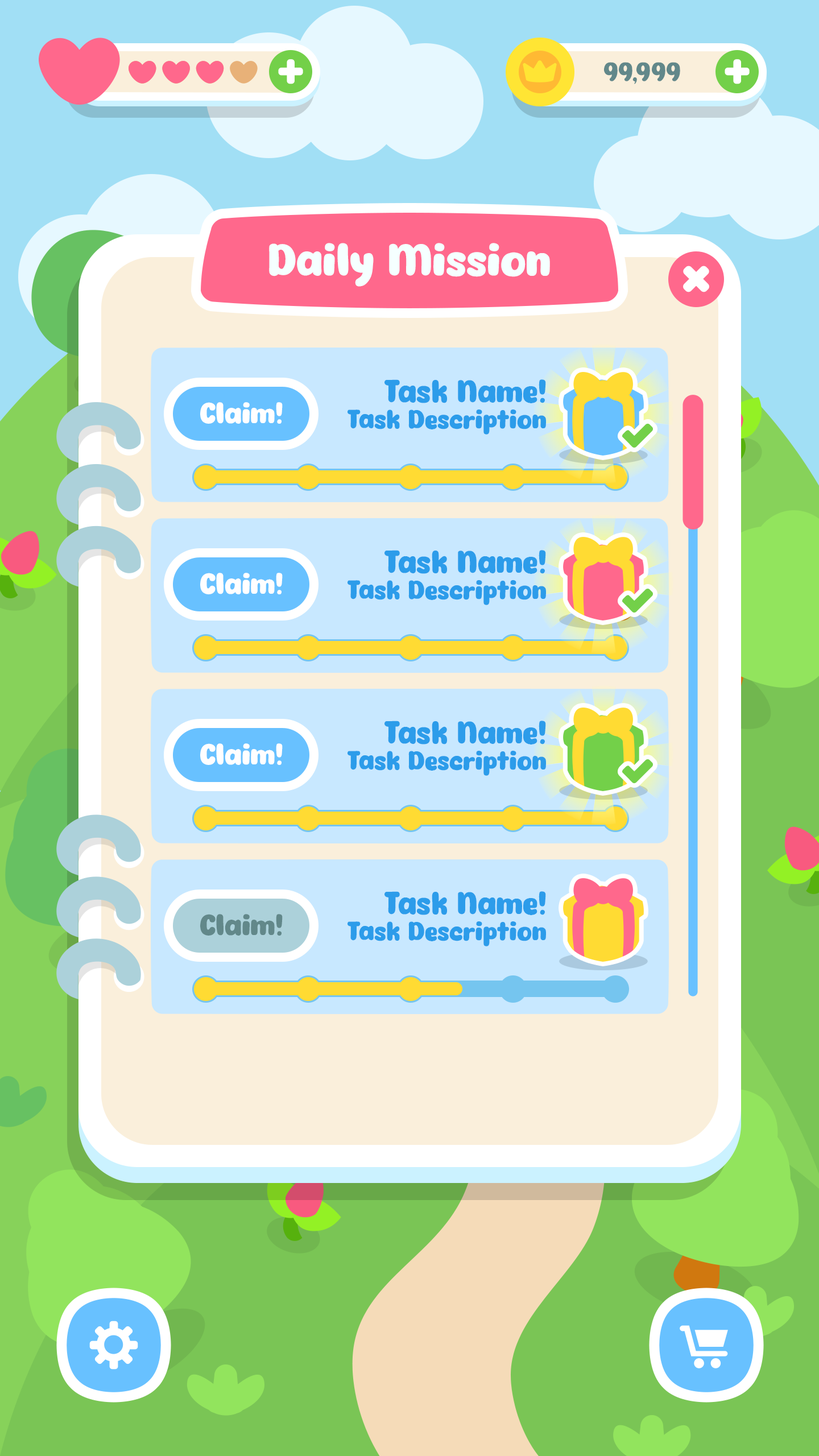
<style>
.page{position:relative;width:819px;height:1456px}
.page>*{position:absolute;margin:0}
.t1{font:43.8px "Eazy-Chat";color:#f5ffff}
.t2{font:30.7px "Eazy-Chat";color:#2c9cea}
.t3{font:28.4px "Eazy-Chat";color:#fffeff}
.t4{font:25.6px "Eazy-Chat";color:#2c9cea}
.t5{font:28.4px "Eazy-Chat";color:#62888a}
</style>
<div class="page">
<p class="t1" style="left:269px;top:243px;width:281px;height:44px">Daily Mission</p>
<p class="t2" style="left:384px;top:379px;width:162px;height:24px">Task Name!</p>
<p class="t3" style="left:200px;top:402px;width:83px;height:22px">Claim!</p>
<p class="t4" style="left:348px;top:409px;width:198px;height:26px">Task Description</p>
<p class="t2" style="left:384px;top:550px;width:162px;height:24px">Task Name!</p>
<p class="t3" style="left:200px;top:573px;width:83px;height:21px">Claim!</p>
<p class="t4" style="left:348px;top:580px;width:198px;height:25px">Task Description</p>
<p class="t2" style="left:384px;top:721px;width:162px;height:23px">Task Name!</p>
<p class="t3" style="left:200px;top:743px;width:83px;height:22px">Claim!</p>
<p class="t4" style="left:348px;top:751px;width:198px;height:25px">Task Description</p>
<p class="t2" style="left:384px;top:891px;width:162px;height:24px">Task Name!</p>
<p class="t5" style="left:200px;top:914px;width:83px;height:22px">Claim!</p>
<p class="t4" style="left:348px;top:921px;width:198px;height:25px">Task Description</p>
</div>
